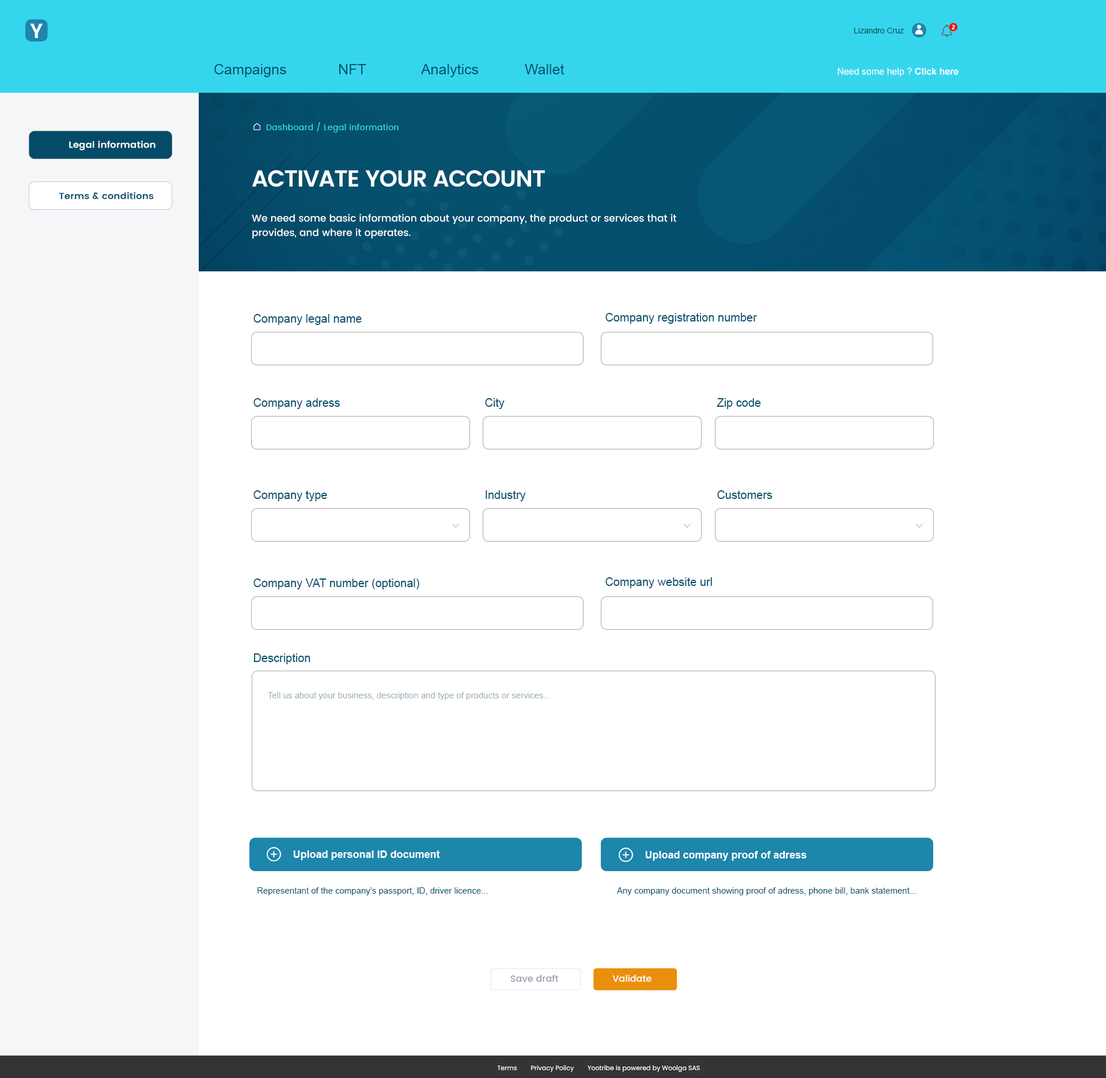
<style>
.page{position:relative;width:1106px;height:1078px;background:#ffffff}
.page>*{position:absolute;margin:0}
.t1{font:20.2px "Poppins-SemiBold";color:#ffffff}
.t2{font:8.1px "ArialMT";color:#105761}
.t3{font:6.3px "Arial-BoldMT";color:#ffffff}
.t4{font:14.4px "ArialMT";color:#05526e}
.t5{font:9.2px "ArialMT";color:#ffffff}
.t6{font:9.2px "Arial-BoldMT";color:#ffffff}
.t7{font:8.1px "Poppins-Regular";letter-spacing:0.04em;color:#38d8ec}
.t8{font:8.9px "Poppins-SemiBold";color:#ffffff;scale:1.07 1}
.t9{font:23px "Poppins-SemiBold";letter-spacing:-0.03em;color:#ffffff}
.t10{font:8.9px "Poppins-SemiBold";color:#044f6e;scale:1.07 1}
.t11{font:9.8px/14.4px "Poppins-Medium";color:#ffffff}
.t12{font:11.5px "ArialMT";color:#04506e}
.t13{font:8.6px "ArialMT";color:#9baeb9}
.t14{font:10.4px "Arial-BoldMT";color:#ffffff}
.t15{font:8.6px "ArialMT";color:#04506e}
.t16{font:9.2px "Poppins-Medium";color:#9aa2af}
.t17{font:9.2px "Poppins-Medium";color:#ffffff}
</style>
<div class="page">
<p class="t1" style="left:30px;top:24px;width:13px;height:14px">Y</p>
<p class="t2" style="left:854px;top:28px;width:51px;height:5px">Lizandro Cruz</p>
<p class="t3" style="left:952px;top:25px;width:3px;height:4px">2</p>
<p class="t4" style="left:214px;top:64px;width:351px;height:13px">Campaigns   NFT   Analytics   Wallet</p>
<p class="t5" style="left:838px;top:67px;width:121px;height:10px">Need some help ? <span class="t6">Click here</span></p>
<p class="t7" style="left:266px;top:122px;width:133px;height:11px">Dashboard / Legal information</p>
<p class="t8" style="left:69px;top:141px;width:87px;height:9px">Legal information</p>
<p class="t9" style="left:252px;top:170px;width:293px;height:17px">ACTIVATE YOUR ACCOUNT</p>
<p class="t10" style="left:59px;top:192px;width:95px;height:7px">Terms &amp; conditions</p>
<p class="t11" style="left:252px;top:214px;width:424px;height:25px">We need some basic information about your company, the product or services that it provides, and where it operates.</p>
<p class="t12" style="left:254px;top:314px;width:108px;height:11px">Company legal name</p>
<p class="t12" style="left:606px;top:313px;width:151px;height:11px">Company registration number</p>
<p class="t12" style="left:254px;top:398px;width:86px;height:11px">Company adress</p>
<p class="t12" style="left:485px;top:398px;width:20px;height:11px">City</p>
<p class="t12" style="left:717px;top:398px;width:44px;height:11px">Zip code</p>
<p class="t12" style="left:254px;top:490px;width:73px;height:11px">Company type</p>
<p class="t12" style="left:486px;top:490px;width:40px;height:11px">Industry</p>
<p class="t12" style="left:717px;top:490px;width:56px;height:9px">Customers</p>
<p class="t12" style="left:254px;top:578px;width:165px;height:11px">Company VAT number (optional)</p>
<p class="t12" style="left:606px;top:577px;width:106px;height:11px">Company website url</p>
<p class="t12" style="left:254px;top:653px;width:57px;height:11px">Description</p>
<p class="t13" style="left:268px;top:692px;width:282px;height:8px">Tell us about your business, description and type of products or services...</p>
<p class="t14" style="left:293px;top:850px;width:147px;height:10px">Upload personal ID document</p>
<p class="t14" style="left:645px;top:851px;width:162px;height:10px">Upload company proof of adress</p>
<p class="t15" style="left:258px;top:887px;width:230px;height:8px">Representant of the company’s passport, ID, driver licence...</p>
<p class="t15" style="left:617px;top:887px;width:300px;height:8px">Any company document showing proof of adress, phone bill, bank statement...</p>
<p class="t16" style="left:510px;top:975px;width:49px;height:7px">Save draft</p>
<p class="t17" style="left:612px;top:975px;width:40px;height:7px">Validate</p>
</div>
